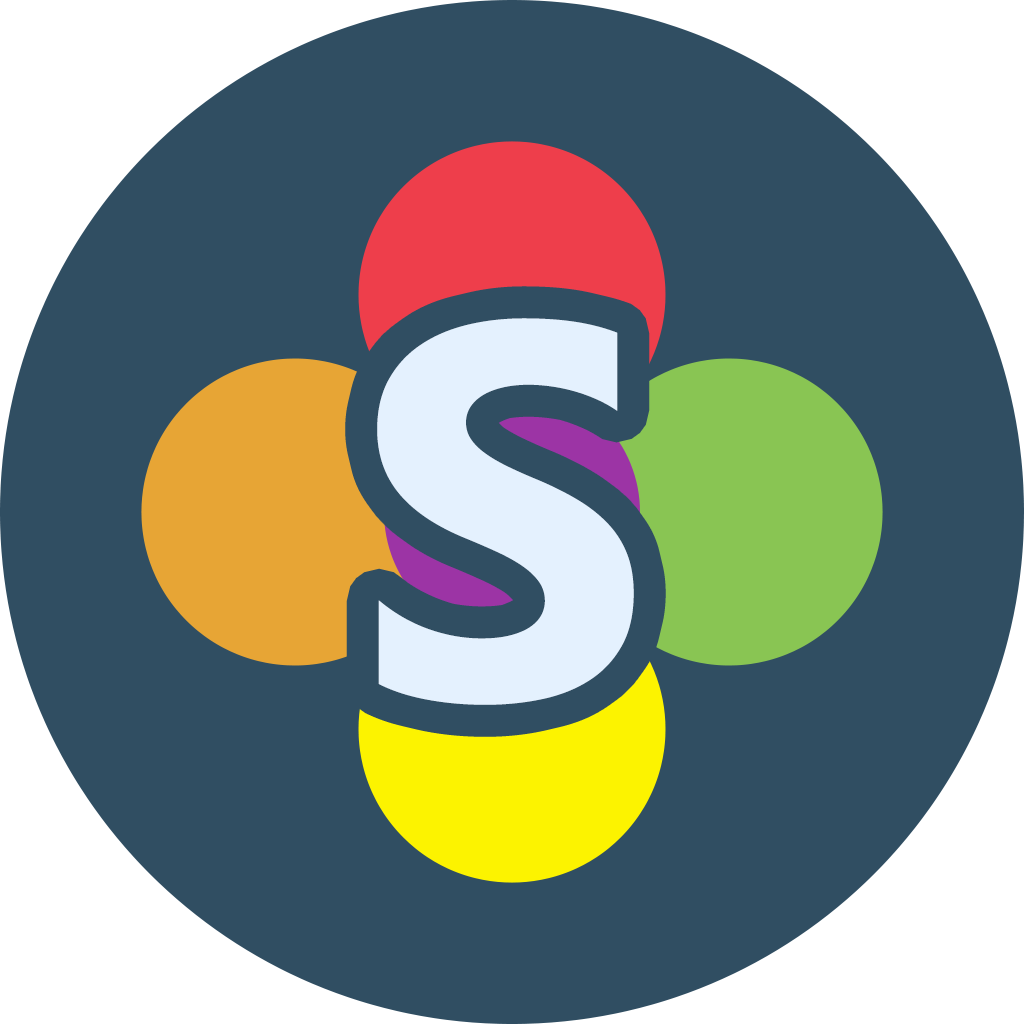
<style>
.page{position:relative;width:1024px;height:1024px;background:#304e62}
.page>*{position:absolute;margin:0}
.t1{font:533.3px "SegoeUI-Bold";letter-spacing:0.032em;color:#e4f1fe}
</style>
<div class="page">
<p class="t1" style="left:377px;top:318px;width:257px;height:387px">S</p>
</div>
